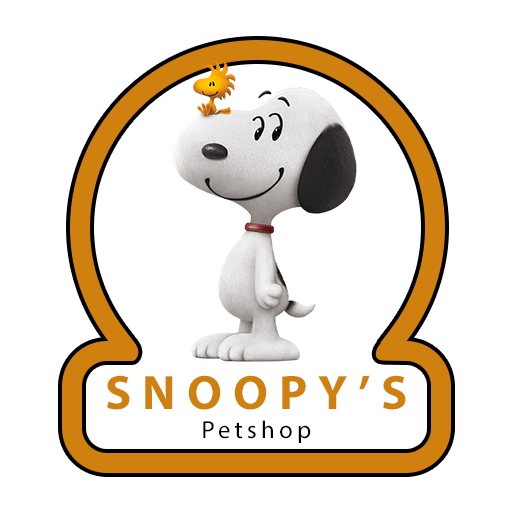
<style>
.page{position:relative;width:512px;height:512px;background:#ffffff}
.page>*{position:absolute;margin:0}
.t1{font:48.7px "MyriadPro-Bold";letter-spacing:0.23em;color:#cf800f}
.t2{font:24.7px "MyriadPro-Regular";letter-spacing:0.17em;color:#000000}
</style>
<div class="page">
<p class="t1" style="left:107px;top:375px;width:299px;height:68px;text-align:center">SNOOPY’S<br><span class="t2">Petshop</span></p>
</div>
